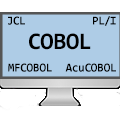
<style>
.page{position:relative;width:120px;height:120px;background:#aecce6}
.page>*{position:absolute;margin:0}
.t1{font:12px "Consolas-Bold";color:#000000}
.t2{font:24px "Consolas-Bold";color:#000000}
</style>
<div class="page">
<p class="t1" style="left:8px;top:16px;width:17px;height:9px">JCL</p>
<p class="t1" style="left:93px;top:16px;width:23px;height:10px">PL/I</p>
<p class="t2" style="left:29px;top:33px;width:62px;height:17px">COBOL</p>
<p class="t1" style="left:8px;top:63px;width:44px;height:9px">MFCOBOL</p>
<p class="t1" style="left:65px;top:63px;width:51px;height:9px">AcuCOBOL</p>
</div>
